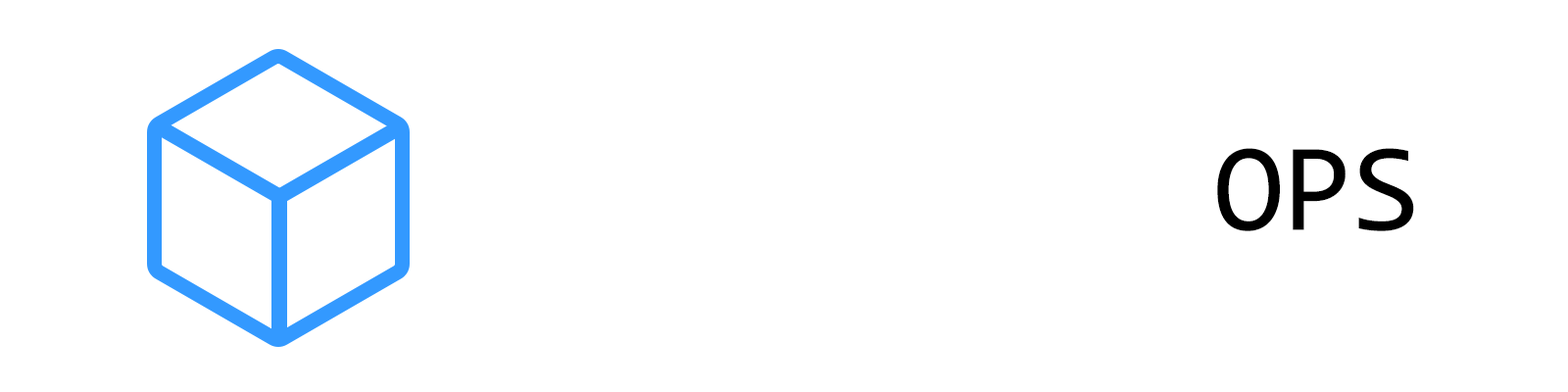
<style>
.page{position:relative;width:1568px;height:392px;background:#ffffff}
.page>*{position:absolute;margin:0}
.t1{font:125.4px "Consolas";color:#000000}
</style>
<div class="page">
<p class="t1" style="left:1217px;top:148px;width:197px;height:83px">OPS</p>
</div>
